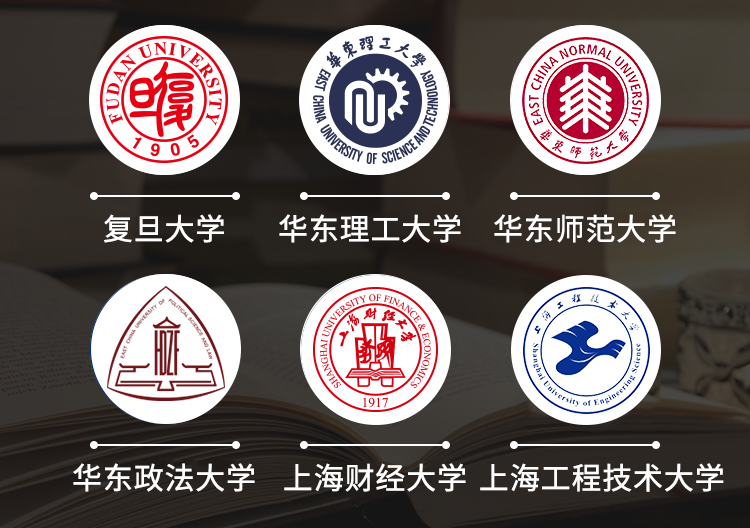
<style>
.page{position:relative;width:750px;height:528px}
.page>*{position:absolute;margin:0}
.t1{font:30px "SourceHanSansCN-Regular";color:#ffffff;font-weight:bold}
</style>
<div class="page">
<p class="t1" style="left:104px;top:214px;width:120px;height:29px">复旦大学</p>
<p class="t1" style="left:279px;top:214px;width:182px;height:29px">华东理工大学</p>
<p class="t1" style="left:494px;top:214px;width:182px;height:29px">华东师范大学</p>
<p class="t1" style="left:73px;top:463px;width:182px;height:29px">华东政法大学</p>
<p class="t1" style="left:284px;top:463px;width:182px;height:29px">上海财经大学</p>
<p class="t1" style="left:480px;top:463px;width:244px;height:29px">上海工程技术大学</p>
</div>
